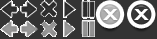
<style>
.page{position:relative;width:157px;height:39px;background:#333333}
.page>*{position:absolute;margin:0}
.t1{font:21.2px "TrebuchetMS-Bold";letter-spacing:-0.005em;color:#ffffff;scale:1.29 1}
</style>
<div class="page">
<p class="t1" style="left:103px;top:9px;width:15px;height:11px">x</p>
<p class="t1" style="left:134px;top:9px;width:15px;height:11px">x</p>
</div>
